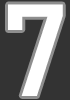
<style>
.page{position:relative;width:70px;height:100px;background:#333333}
.page>*{position:absolute;margin:0}
.t1{font:128.8px "Bahnschrift";color:#ffffff;scale:1.09 1}
</style>
<div class="page">
<p class="t1" style="left:8px;top:4px;width:55px;height:92px">7</p>
</div>
